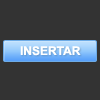
<style>
.page{position:relative;width:100px;height:100px;background:#333333}
.page>*{position:absolute;margin:0}
.t1{font:12px "Arial-BoldMT";color:#ffffff}
</style>
<div class="page">
<p class="t1" style="left:20px;top:46px;width:61px;height:10px">INSERTAR</p>
</div>
